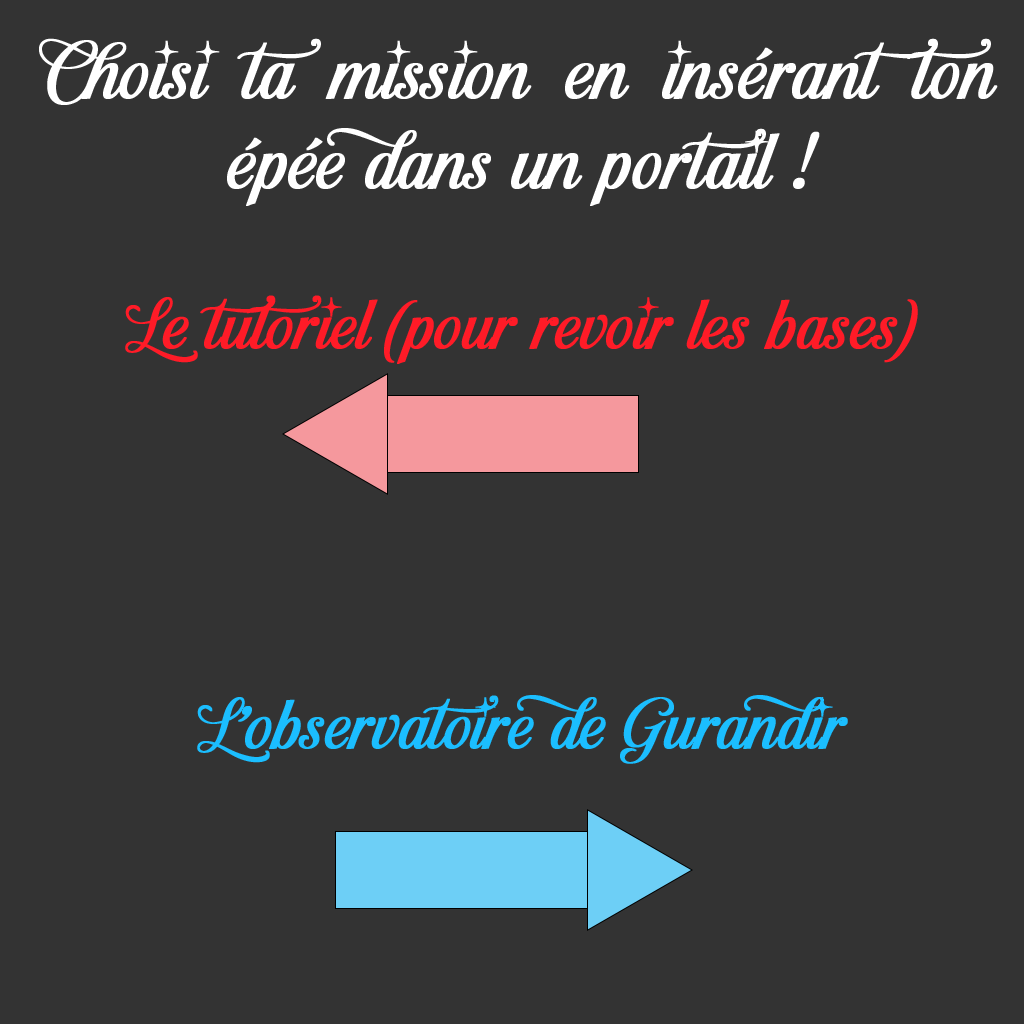
<style>
.page{position:relative;width:1024px;height:1024px;background:#333333}
.page>*{position:absolute;margin:0}
.t1{font:75px "LastChristmasPERSONALUSE-Regular";color:#ffffff;font-weight:bold}
.t2{font:66.7px "LastChristmasPERSONALUSE-Regular";color:#ff1b27;font-weight:bold}
.t3{font:66.7px "LastChristmasPERSONALUSE-Regular";color:#1bbeff;font-weight:bold}
</style>
<div class="page">
<p class="t1" style="left:39px;top:38px;width:959px;height:726px;text-align:justify">Choisi ta mission en insérant ton épée dans un portail !<br><br><span class="t2">Le tutoriel (pour revoir les bases)<br><br><br><br><br></span><span class="t3">L’observatoire de Gurandir</span></p>
</div>
